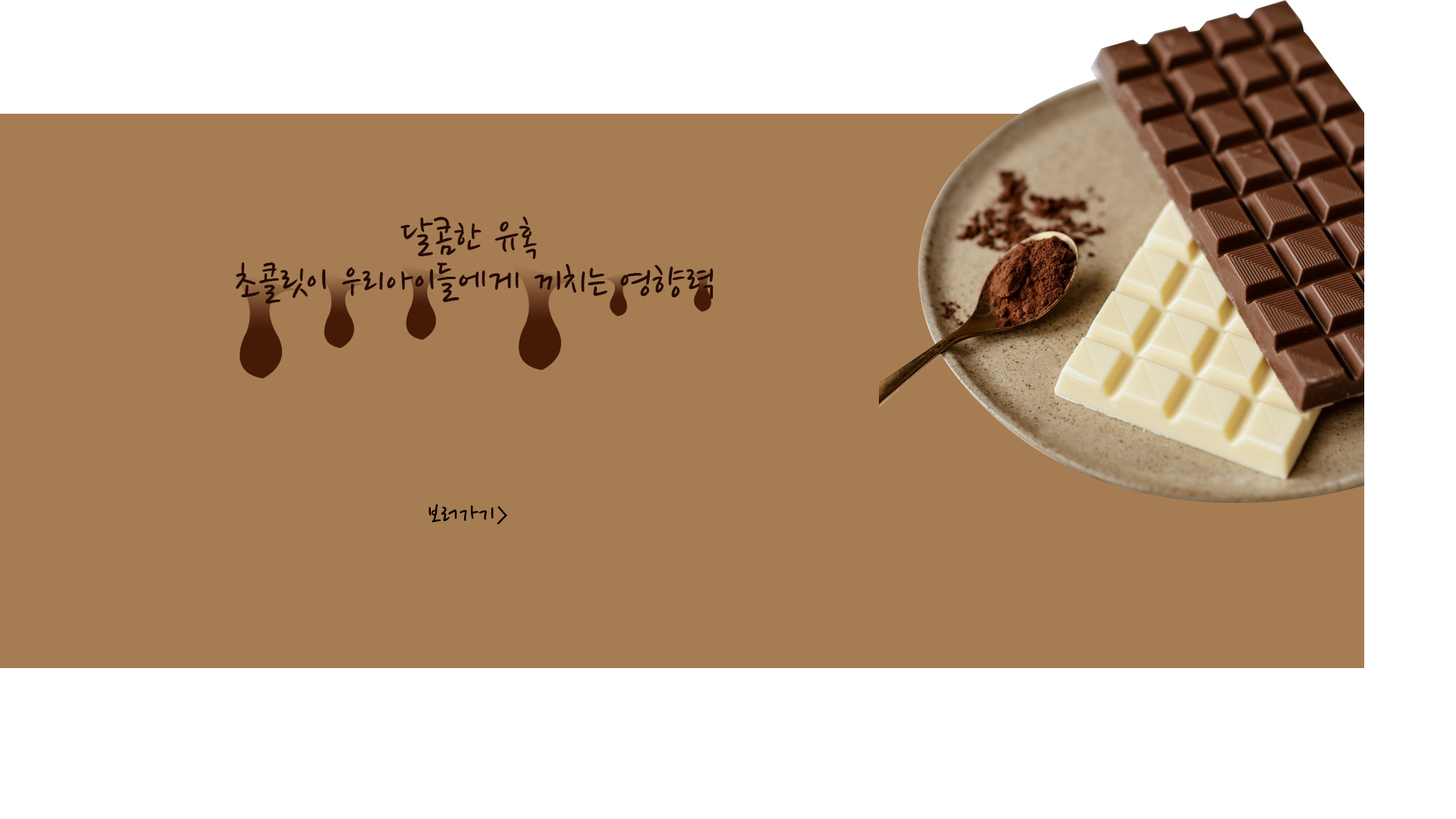
<style>
.page{position:relative;width:1456px;height:819px;background:#a67c52}
.page>*{position:absolute;margin:0}
.t1{font:45.5px/45.5px "NanumPen";color:#240a06}
.t2{font:30.3px "NanumPen";color:#010101}
</style>
<div class="page">
<p class="t1" style="left:236px;top:216px;width:478px;height:88px;text-align:center">달콤한 유혹 <br>초콜릿이 우리아이들에게 끼치는 영향력</p>
<p class="t2" style="left:428px;top:504px;width:79px;height:21px">보러가기&gt;</p>
</div>
